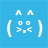
<style>
.page{position:relative;width:48px;height:48px;background:#33b5e5}
.page>*{position:absolute;margin:0}
.t1{font:13.5px "Arial-BoldMT";color:#ffffff}
.t2{font:18px "Arial-BoldMT";color:#ffffff}
.t3{font:18px "ArialMT";color:#ffffff}
.t4{font:9px "Arial-BoldMT";color:#ffffff}
.t5{font:6.8px "Arial-BoldMT";color:#ffffff}
</style>
<div class="page">
<p class="t1" style="left:15px;top:10px;width:19px;height:5px">^ ^</p>
<p class="t2" style="left:7px;top:20px;width:36px;height:17px"><span class="t3"> </span>(  .  )</p>
<p class="t4" style="left:16px;top:27px;width:16px;height:5px">&gt;  &lt;</p>
<p class="t5" style="left:18px;top:21px;width:13px;height:4px">o  o</p>
</div>
